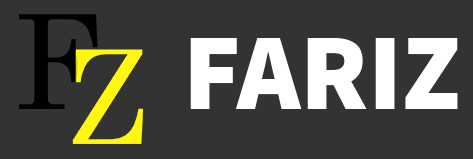
<style>
.page{position:relative;width:473px;height:159px;background:#333333}
.page>*{position:absolute;margin:0}
.t1{font:108.4px "Assistant-ExtraBold";color:#ffffff}
</style>
<div class="page">
<p class="t1" style="left:190px;top:38px;width:268px;height:71px">FARIZ</p>
</div>
